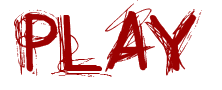
<style>
.page{position:relative;width:222px;height:90px;background:#ffffff}
.page>*{position:absolute;margin:0}
.t1{font:52.9px "AllOverAgain";color:#9c0101}
</style>
<div class="page">
<p class="t1" style="left:14px;top:0px;width:188px;height:77px">play</p>
</div>
